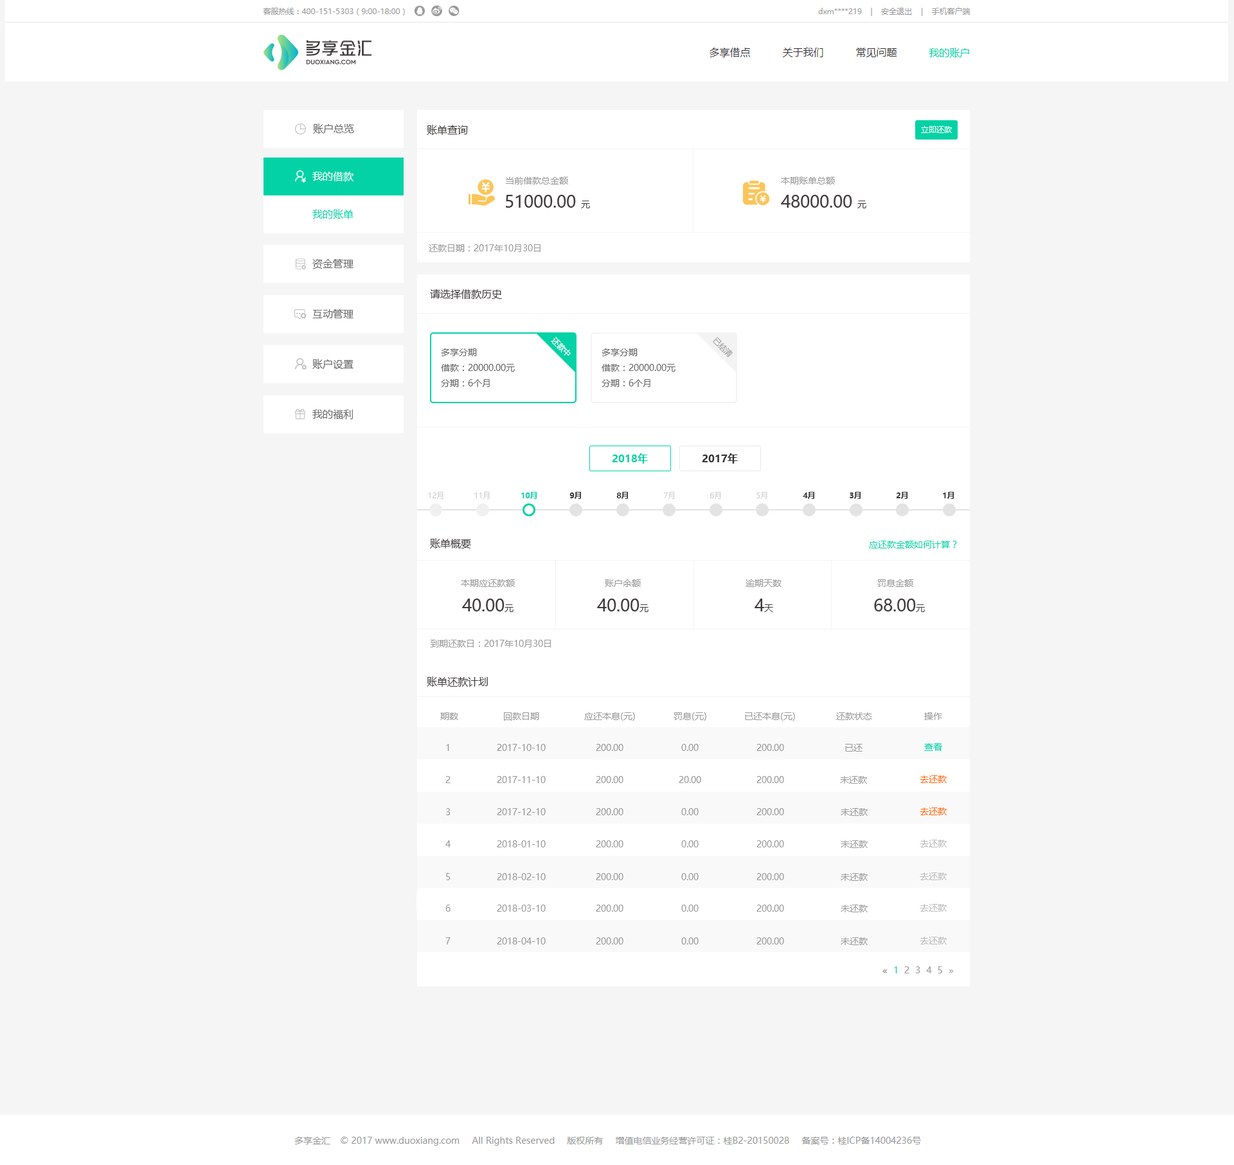
<style>
.page{position:relative;width:1234px;height:1165px;background:#f5f5f5}
.page>*{position:absolute;margin:0}
.t1{font:10.3px "MicrosoftYaHei";color:#666666}
.t2{font:10.3px "MicrosoftYaHei";color:#3e3a39}
.t3{font:7.7px "MicrosoftYaHei";color:#ffffff}
.t4{font:10.3px "MicrosoftYaHei";color:#ffffff}
.t5{font:9px "MicrosoftYaHei";color:#999999}
.t6{font:16.7px "MicrosoftYaHei";color:#3e3a39}
.t7{font:9px "MicrosoftYaHei";color:#3e3a39}
.t8{font:10.3px "MicrosoftYaHei";color:#02d2a6}
.t9{font:7.7px "MicrosoftYaHei";color:#999999}
.t10{font:9px/15.4px "MicrosoftYaHei";color:#666666}
.t11{font:10.3px "MicrosoftYaHei-Bold";color:#02d2a6}
.t12{font:10.3px "MicrosoftYaHei-Bold";color:#333333}
.t13{font:7.7px "MicrosoftYaHei";color:#cccccc}
.t14{font:7.7px "MicrosoftYaHei-Bold";color:#02d2a6}
.t15{font:7.7px "MicrosoftYaHei-Bold";color:#333333}
.t16{font:9px "MicrosoftYaHei";color:#02d2a6}
.t17{font:9px "MicrosoftYaHei";color:#ff6800}
.t18{font:9px "MicrosoftYaHei";color:#bbbbbb}
</style>
<div class="page">
<p class="t1" style="left:313px;top:123px;width:41px;height:11px">账户总览</p>
<p class="t2" style="left:427px;top:125px;width:41px;height:10px">账单查询</p>
<p class="t3" style="left:921px;top:126px;width:31px;height:7px">立即还款</p>
<p class="t4" style="left:312px;top:172px;width:42px;height:9px">我的借款</p>
<p class="t5" style="left:505px;top:177px;width:63px;height:7px">当前借款总金额</p>
<p class="t5" style="left:781px;top:177px;width:54px;height:7px">本期账单总额</p>
<p class="t6" style="left:506px;top:195px;width:84px;height:13px">51000.00 <span class="t7">元</span></p>
<p class="t6" style="left:781px;top:195px;width:86px;height:13px">48000.00 <span class="t7">元</span></p>
<p class="t8" style="left:312px;top:209px;width:42px;height:10px">我的账单</p>
<p class="t5" style="left:429px;top:244px;width:112px;height:8px">还款日期：2017年10月30日</p>
<p class="t1" style="left:312px;top:259px;width:42px;height:10px">资金管理</p>
<p class="t2" style="left:430px;top:289px;width:72px;height:10px">请选择借款历史</p>
<p class="t1" style="left:312px;top:309px;width:42px;height:9px">互动管理</p>
<p class="t3" style="left:551px;top:337px;width:20px;height:19px;rotate:45deg">还款中</p>
<p class="t9" style="left:713px;top:337px;width:21px;height:20px;rotate:45deg">已结清</p>
<p class="t10" style="left:441px;top:348px;width:74px;height:39px">多享分期<br>借款：20000.00元<br>分期：6个月</p>
<p class="t10" style="left:602px;top:348px;width:74px;height:39px">多享分期<br>借款：20000.00元<br>分期：6个月</p>
<p class="t1" style="left:312px;top:359px;width:42px;height:10px">账户设置</p>
<p class="t1" style="left:312px;top:410px;width:41px;height:9px">我的福利</p>
<p class="t11" style="left:612px;top:453px;width:36px;height:11px">2018年</p>
<p class="t12" style="left:702px;top:453px;width:36px;height:11px">2017年</p>
<p class="t13" style="left:428px;top:492px;width:16px;height:7px">12月</p>
<p class="t13" style="left:474px;top:492px;width:16px;height:7px">11月</p>
<p class="t14" style="left:521px;top:492px;width:16px;height:7px">10月</p>
<p class="t15" style="left:570px;top:492px;width:11px;height:7px">9月</p>
<p class="t15" style="left:616px;top:492px;width:12px;height:7px">8月</p>
<p class="t13" style="left:663px;top:492px;width:12px;height:7px">7月</p>
<p class="t13" style="left:710px;top:492px;width:11px;height:7px">6月</p>
<p class="t13" style="left:757px;top:492px;width:11px;height:7px">5月</p>
<p class="t15" style="left:803px;top:492px;width:12px;height:7px">4月</p>
<p class="t15" style="left:850px;top:492px;width:11px;height:7px">3月</p>
<p class="t15" style="left:897px;top:492px;width:11px;height:7px">2月</p>
<p class="t15" style="left:943px;top:492px;width:11px;height:7px">1月</p>
<p class="t2" style="left:430px;top:538px;width:41px;height:10px">账单概要</p>
<p class="t16" style="left:869px;top:541px;width:88px;height:7px">应还款金额如何计算？</p>
<p class="t5" style="left:461px;top:579px;width:54px;height:8px">本期应还款额</p>
<p class="t5" style="left:605px;top:579px;width:36px;height:8px">账户余额</p>
<p class="t5" style="left:746px;top:579px;width:36px;height:8px">逾期天数</p>
<p class="t5" style="left:878px;top:579px;width:36px;height:8px">罚息金额</p>
<p class="t6" style="left:462px;top:598px;width:52px;height:14px">40.00<span class="t7">元</span></p>
<p class="t6" style="left:597px;top:598px;width:52px;height:14px">40.00<span class="t7">元</span></p>
<p class="t6" style="left:755px;top:598px;width:18px;height:14px">4<span class="t7">天</span></p>
<p class="t6" style="left:874px;top:598px;width:51px;height:14px">68.00<span class="t7">元</span></p>
<p class="t5" style="left:430px;top:640px;width:121px;height:7px">到期还款日：2017年10月30日</p>
<p class="t2" style="left:427px;top:676px;width:61px;height:11px">账单还款计划</p>
<p class="t5" style="left:440px;top:712px;width:18px;height:8px">期数</p>
<p class="t5" style="left:504px;top:712px;width:35px;height:9px">回款日期</p>
<p class="t5" style="left:584px;top:712px;width:51px;height:9px">应还本息(元)</p>
<p class="t5" style="left:674px;top:712px;width:32px;height:9px">罚息(元)</p>
<p class="t5" style="left:745px;top:712px;width:50px;height:9px">已还本息(元)</p>
<p class="t5" style="left:836px;top:712px;width:36px;height:8px">还款状态</p>
<p class="t5" style="left:924px;top:712px;width:18px;height:8px">操作</p>
<p class="t5" style="left:446px;top:744px;width:3px;height:7px">1</p>
<p class="t5" style="left:497px;top:744px;width:49px;height:7px">2017-10-10</p>
<p class="t5" style="left:596px;top:744px;width:28px;height:7px">200.00</p>
<p class="t5" style="left:681px;top:744px;width:18px;height:7px">0.00</p>
<p class="t5" style="left:757px;top:744px;width:27px;height:7px">200.00</p>
<p class="t5" style="left:845px;top:744px;width:18px;height:8px">已还</p>
<p class="t16" style="left:924px;top:743px;width:18px;height:8px">查看</p>
<p class="t5" style="left:446px;top:776px;width:5px;height:7px">2</p>
<p class="t5" style="left:497px;top:776px;width:49px;height:7px">2017-11-10</p>
<p class="t5" style="left:596px;top:776px;width:28px;height:7px">200.00</p>
<p class="t5" style="left:679px;top:776px;width:22px;height:7px">20.00</p>
<p class="t5" style="left:757px;top:776px;width:27px;height:7px">200.00</p>
<p class="t5" style="left:840px;top:776px;width:27px;height:8px">未还款</p>
<p class="t17" style="left:920px;top:775px;width:27px;height:8px">去还款</p>
<p class="t5" style="left:446px;top:808px;width:5px;height:7px">3</p>
<p class="t5" style="left:497px;top:808px;width:49px;height:7px">2017-12-10</p>
<p class="t5" style="left:596px;top:808px;width:28px;height:7px">200.00</p>
<p class="t5" style="left:681px;top:808px;width:18px;height:7px">0.00</p>
<p class="t5" style="left:757px;top:808px;width:27px;height:7px">200.00</p>
<p class="t5" style="left:841px;top:808px;width:27px;height:8px">未还款</p>
<p class="t17" style="left:920px;top:807px;width:27px;height:8px">去还款</p>
<p class="t5" style="left:446px;top:840px;width:5px;height:7px">4</p>
<p class="t5" style="left:497px;top:840px;width:49px;height:7px">2018-01-10</p>
<p class="t5" style="left:596px;top:840px;width:28px;height:7px">200.00</p>
<p class="t5" style="left:681px;top:840px;width:18px;height:7px">0.00</p>
<p class="t5" style="left:757px;top:840px;width:27px;height:7px">200.00</p>
<p class="t5" style="left:841px;top:840px;width:27px;height:8px">未还款</p>
<p class="t18" style="left:920px;top:840px;width:27px;height:7px">去还款</p>
<p class="t5" style="left:446px;top:873px;width:5px;height:7px">5</p>
<p class="t5" style="left:497px;top:873px;width:49px;height:7px">2018-02-10</p>
<p class="t5" style="left:596px;top:873px;width:28px;height:7px">200.00</p>
<p class="t5" style="left:681px;top:873px;width:18px;height:7px">0.00</p>
<p class="t5" style="left:757px;top:873px;width:27px;height:7px">200.00</p>
<p class="t5" style="left:841px;top:873px;width:27px;height:8px">未还款</p>
<p class="t18" style="left:920px;top:872px;width:27px;height:8px">去还款</p>
<p class="t5" style="left:446px;top:905px;width:5px;height:7px">6</p>
<p class="t5" style="left:497px;top:905px;width:49px;height:7px">2018-03-10</p>
<p class="t5" style="left:596px;top:905px;width:28px;height:7px">200.00</p>
<p class="t5" style="left:681px;top:905px;width:18px;height:7px">0.00</p>
<p class="t5" style="left:757px;top:905px;width:27px;height:7px">200.00</p>
<p class="t5" style="left:841px;top:905px;width:27px;height:7px">未还款</p>
<p class="t18" style="left:920px;top:904px;width:27px;height:8px">去还款</p>
<p class="t5" style="left:446px;top:937px;width:5px;height:7px">7</p>
<p class="t5" style="left:497px;top:937px;width:49px;height:7px">2018-04-10</p>
<p class="t5" style="left:596px;top:937px;width:28px;height:7px">200.00</p>
<p class="t5" style="left:681px;top:937px;width:18px;height:7px">0.00</p>
<p class="t5" style="left:757px;top:937px;width:27px;height:7px">200.00</p>
<p class="t5" style="left:841px;top:937px;width:27px;height:8px">未还款</p>
<p class="t18" style="left:920px;top:937px;width:27px;height:7px">去还款</p>
</div>
